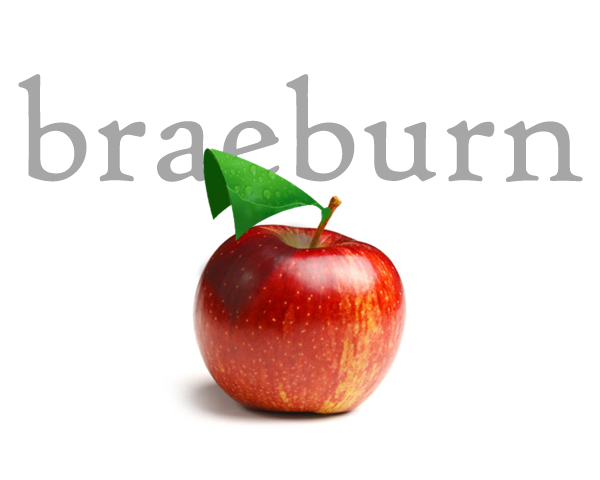
<style>
.page{position:relative;width:600px;height:480px;background:#ffffff}
.page>*{position:absolute;margin:0}
.t1{font:152.3px "HighTowerText-Reg";color:#a6a6a6}
</style>
<div class="page">
<p class="t1" style="left:18px;top:74px;width:565px;height:108px">braeburn</p>
</div>
